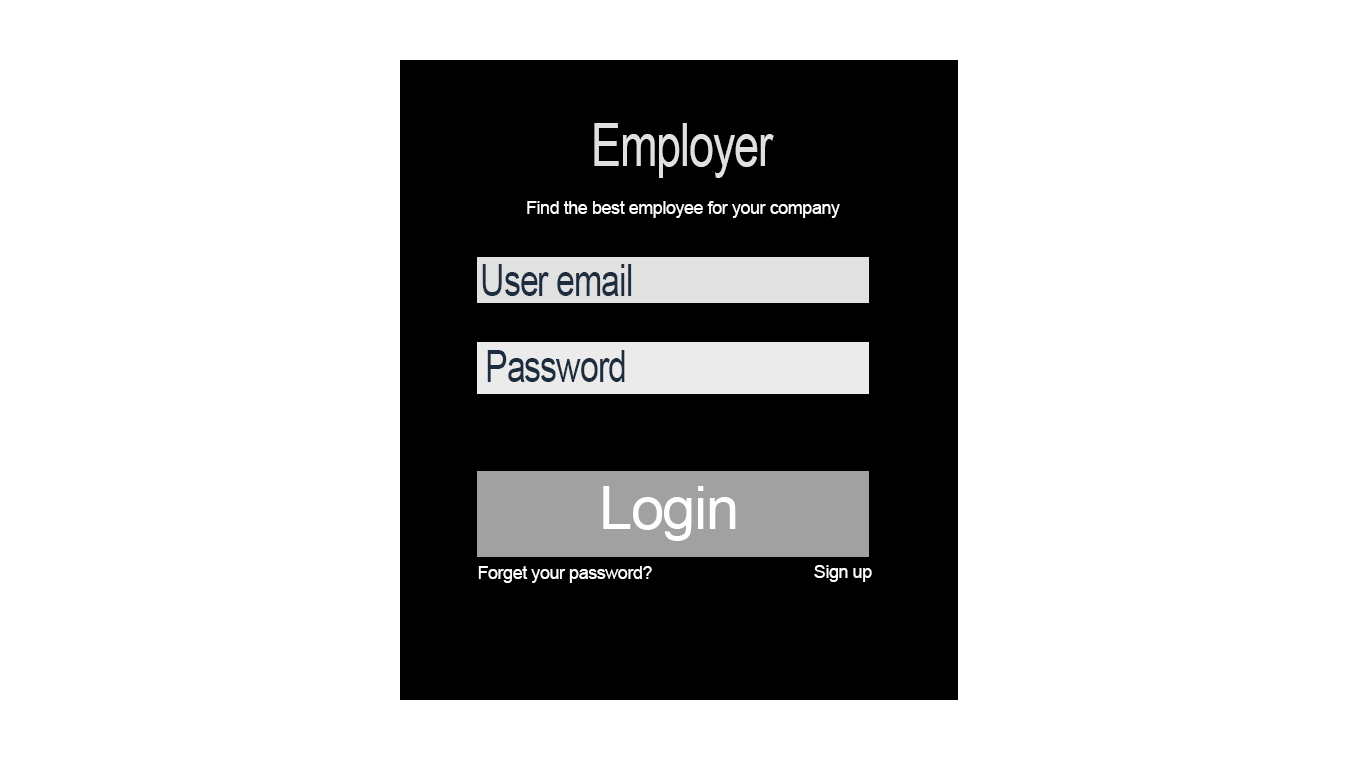
<style>
.page{position:relative;width:1366px;height:768px;background:#ffffff}
.page>*{position:absolute;margin:0}
.t1{font:60px "ArialMT";letter-spacing:-0.025em;color:#e0e0e0;scale:0.75 1}
.t2{font:18px "ArialMT";letter-spacing:-0.025em;color:#ffffff}
.t3{font:44.8px "ArialMT";letter-spacing:-0.025em;color:#1e2d3e;scale:0.75 1}
.t4{font:60px "ArialMT";letter-spacing:-0.025em;color:#ffffff}
</style>
<div class="page">
<p class="t1" style="left:594px;top:123px;width:180px;height:55px">Employer</p>
<p class="t2" style="left:527px;top:201px;width:313px;height:17px">Find the best employee for your company</p>
<p class="t3" style="left:482px;top:264px;width:150px;height:32px">User email</p>
<p class="t3" style="left:487px;top:350px;width:138px;height:32px">Password</p>
<p class="t4" style="left:603px;top:486px;width:133px;height:55px">Login</p>
<p class="t2" style="left:478px;top:566px;width:174px;height:17px">Forget your password?</p>
<p class="t2" style="left:814px;top:565px;width:58px;height:17px">Sign up</p>
</div>
